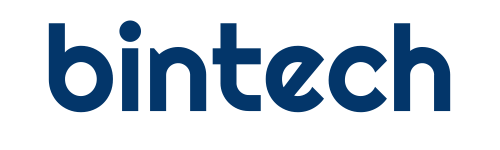
<style>
.page{position:relative;width:500px;height:150px;background:#ffffff}
.page>*{position:absolute;margin:0}
.t1{font:120px "Righteous-Regular";color:#03366a}
</style>
<div class="page">
<p class="t1" style="left:48px;top:20px;width:403px;height:93px">bintech</p>
</div>
